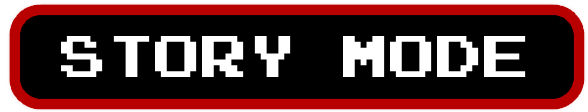
<style>
.page{position:relative;width:588px;height:112px;background:#000000}
.page>*{position:absolute;margin:0}
.t1{font:47px "Super-Mario-Bros.-NES";color:#ffffff}
</style>
<div class="page">
<p class="t1" style="left:61px;top:35px;width:465px;height:42px">STORY MODE</p>
</div>
